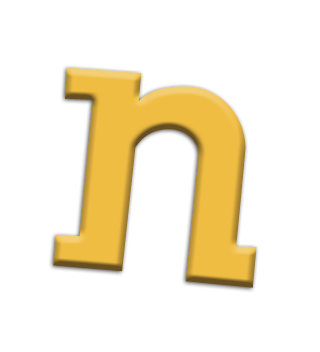
<style>
.page{position:relative;width:320px;height:352px;background:#ffffff}
.page>*{position:absolute;margin:0}
.t1{font:422px "FinkHeavy";color:#efbd42}
</style>
<div class="page">
<p class="t1" style="left:53px;top:67px;width:204px;height:221px;rotate:5deg">n</p>
</div>
